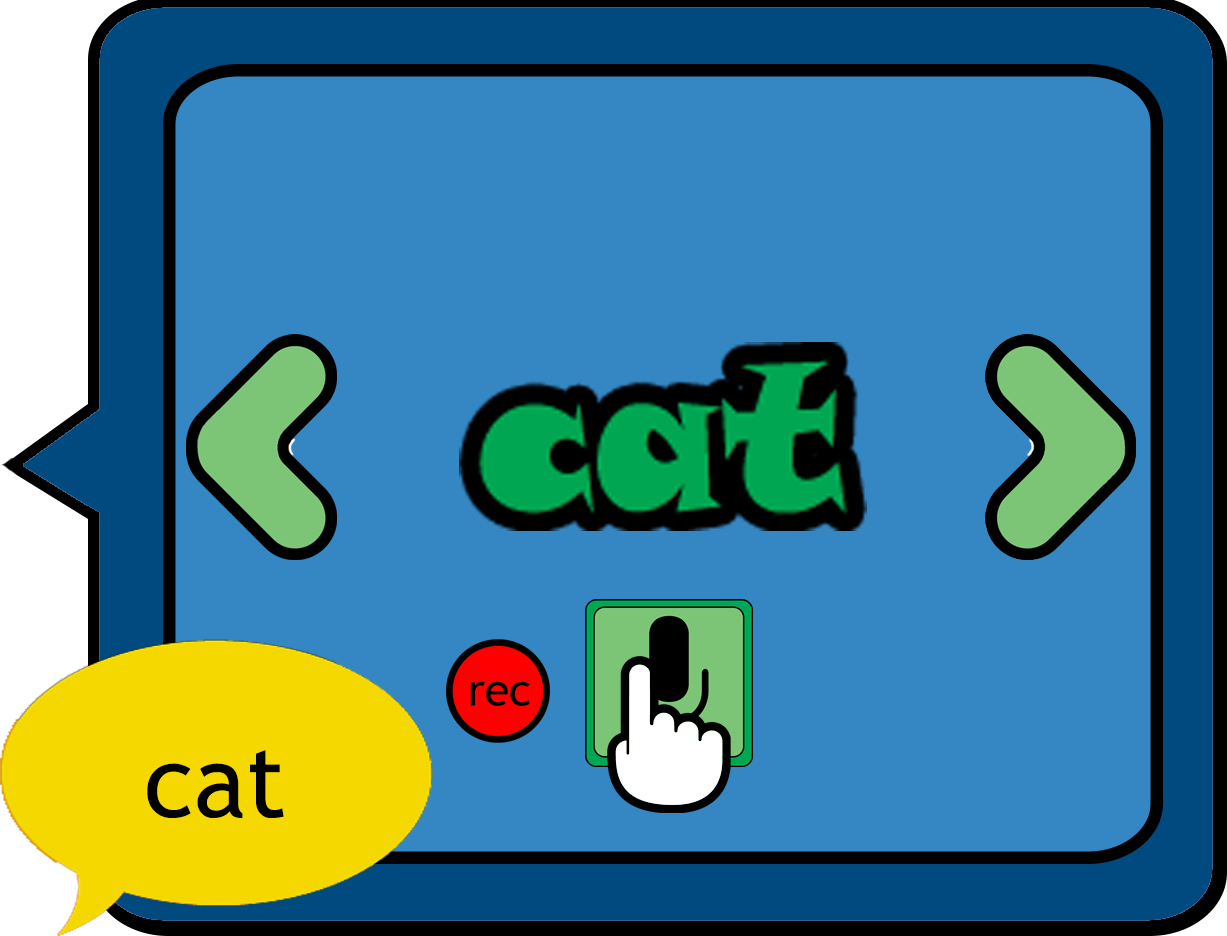
<style>
.page{position:relative;width:1227px;height:936px;background:#3587c3}
.page>*{position:absolute;margin:0}
.t1{font:100px "TrebuchetMS";color:#000000}
</style>
<div class="page">
<p class="t1" style="left:147px;top:750px;width:137px;height:68px">cat</p>
</div>
